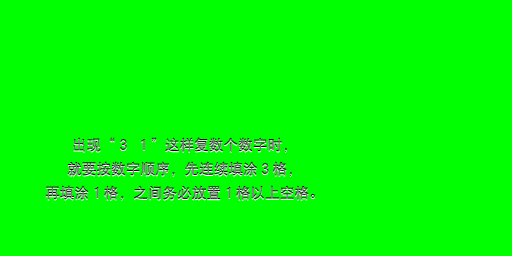
<style>
.page{position:relative;width:512px;height:256px;background:#00ff00}
.page>*{position:absolute;margin:0}
.t1{font:14.7px/24px "DFPHeiW5-GB"}
</style>
<div class="page">
<p class="t1" style="left:45px;top:137px;width:270px;height:63px;text-align:center">出现“３ １”这样复数个数字时，<br>就要按数字顺序，先连续填涂３格，<br>再填涂１格，之间务必放置１格以上空格。</p>
</div>
